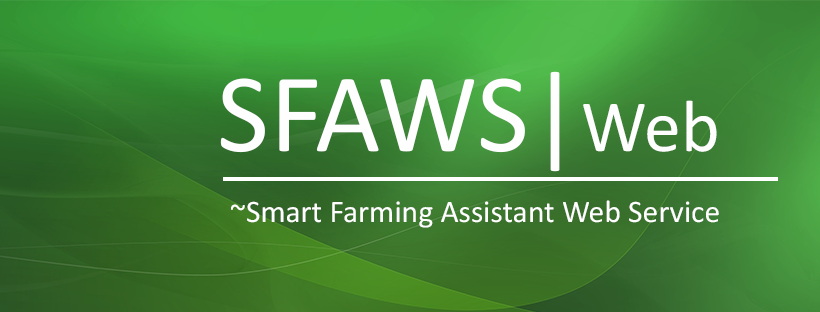
<style>
.page{position:relative;width:820px;height:312px}
.page>*{position:absolute;margin:0}
.t1{font:54.4px "Calibri";color:#fefefe}
.t2{font:74px "Calibri";color:#fefefe}
.t3{font:15.2px "Calibri";color:#fefefe}
</style>
<div class="page">
<p class="t1" style="left:220px;top:71px;width:497px;height:101px">SFAWS|<span class="t2">Web</span></p>
<p class="t3" style="left:231px;top:200px;width:488px;height:28px">~Smart Farming Assistant Web Service</p>
</div>
